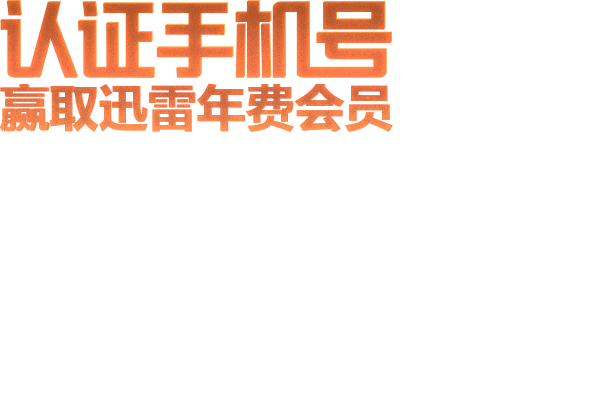
<style>
.page{position:relative;width:600px;height:400px;background:#ffffff}
.page>*{position:absolute;margin:0}
.t1{font:49.2px "MicrosoftYaHei-Bold"}
.t2{font:49.2px "MicrosoftYaHei-Bold";color:#ec7a48}
.t3{font:49.2px "MicrosoftYaHei-Bold";color:#f77e4a}
</style>
<div class="page">
<p class="t1" style="left:0px;top:85px;width:392px;height:50px">赢取迅雷年费会员</p>
<p class="t2" style="left:0px;top:83px;width:392px;height:50px">赢取迅雷年费会员</p>
<p class="t3" style="left:1px;top:83px;width:392px;height:50px">赢取迅雷年费会员</p>
</div>
